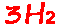
<style>
.page{position:relative;width:61px;height:28px;background:#ffffff}
.page>*{position:absolute;margin:0}
.t1{font:26px "SegoeScript";color:#ff0000;font-weight:bold}
.t2{font:18px "Shruti-Bold";color:#ff0000;font-weight:bold}
</style>
<div class="page">
<p class="t1" style="left:5px;top:2px;width:50px;height:22px">3H<span class="t2">2</span></p>
</div>
